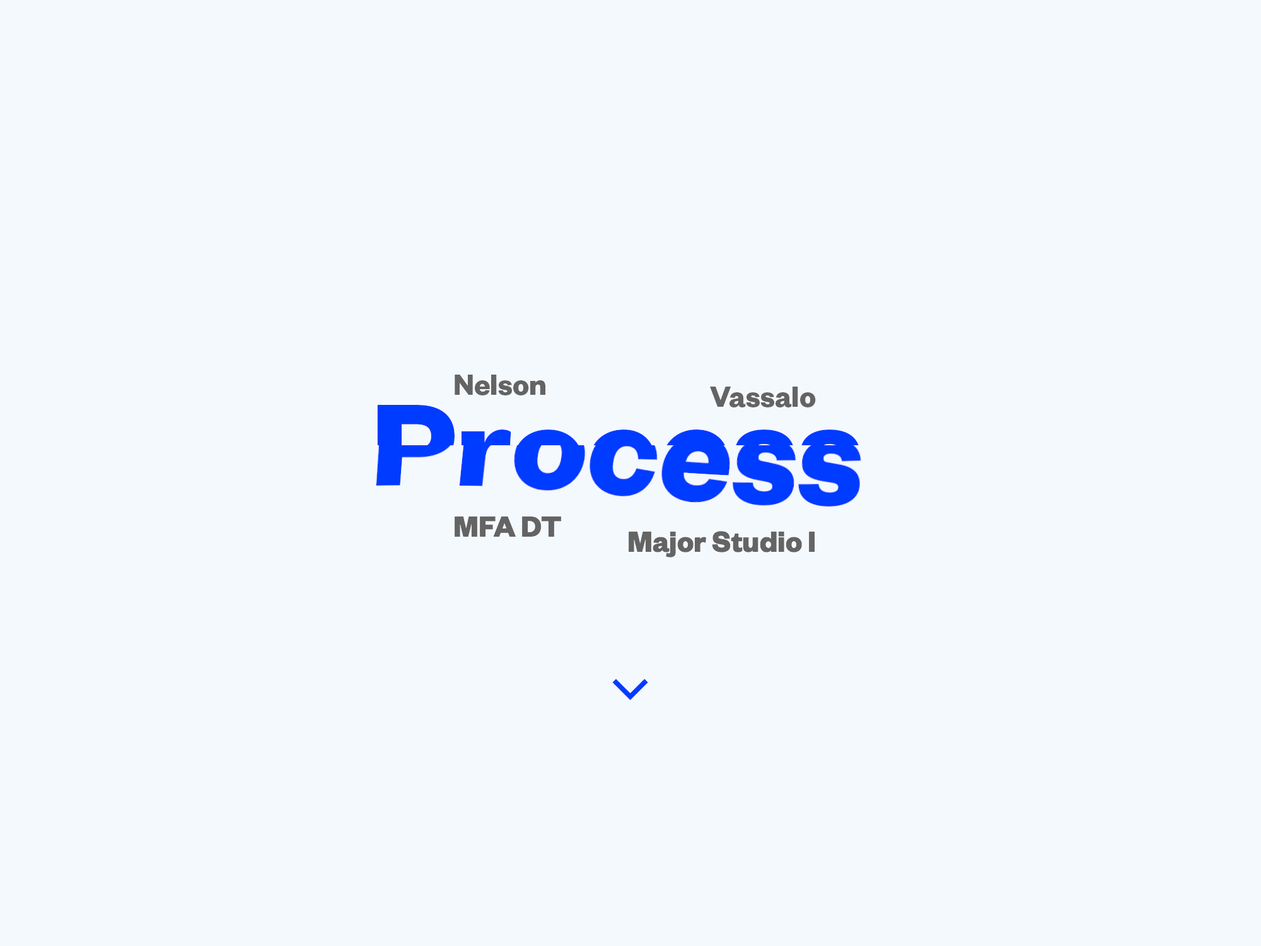
<style>
.page{position:relative;width:1261px;height:946px;background:#f4f9fe}
.page>*{position:absolute;margin:0}
.t1{font:31.5px "FoundersGrotesk-Bold";color:#646464}
</style>
<div class="page">
<p class="t1" style="left:455px;top:374px;width:90px;height:21px">Nelson</p>
<p class="t1" style="left:710px;top:386px;width:106px;height:21px">Vassalo</p>
<p class="t1" style="left:455px;top:516px;width:106px;height:21px">MFA DT</p>
<p class="t1" style="left:629px;top:531px;width:186px;height:26px">Major Studio I</p>
</div>
